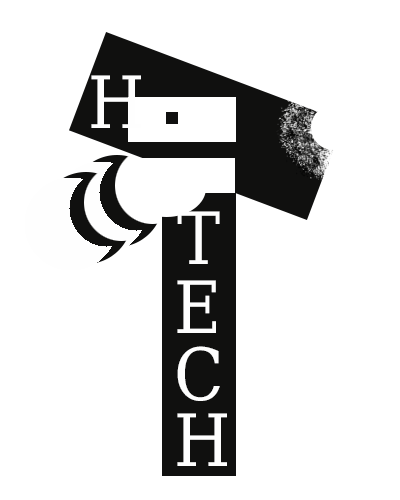
<style>
.page{position:relative;width:400px;height:500px;background:#ffffff}
.page>*{position:absolute;margin:0}
.t1{font:72px "DejaVuSerifCondensed";color:#fefefe}
</style>
<div class="page">
<p class="t1" style="left:91px;top:75px;width:50px;height:53px">H</p>
<p class="t1" style="left:177px;top:211px;width:43px;height:53px">T</p>
<p class="t1" style="left:177px;top:280px;width:39px;height:53px">E</p>
<p class="t1" style="left:177px;top:346px;width:43px;height:55px">C</p>
<p class="t1" style="left:177px;top:413px;width:50px;height:53px">H</p>
</div>
